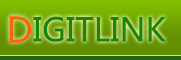
<style>
.page{position:relative;width:181px;height:60px}
.page>*{position:absolute;margin:0}
.t1{font:34.7px "MicrosoftYaHei";color:#ff6600}
.t2{font:32px "MicrosoftYaHei";color:#198705}
</style>
<div class="page">
<p class="t1" style="left:9px;top:16px;width:23px;height:27px">D</p>
<p class="t2" style="left:33px;top:16px;width:133px;height:26px">IGITLINK</p>
</div>
